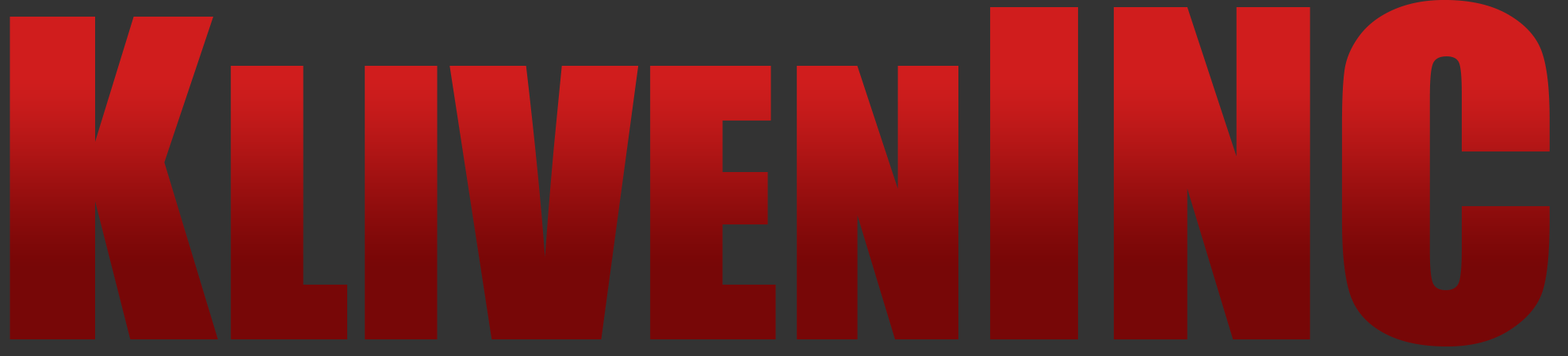
<style>
.page{position:relative;width:1568px;height:356px;background:#333333}
.page>*{position:absolute;margin:0}
.t1{font:346.5px "Impact"}
.t2{font:408.3px "Impact"}
.t3{font:420px "Impact"}
</style>
<div class="page">
<p class="t1" style="left:10px;top:0px;width:1540px;height:346px"><span class="t2">K</span>LIVEN<span class="t3">INC</span></p>
</div>
